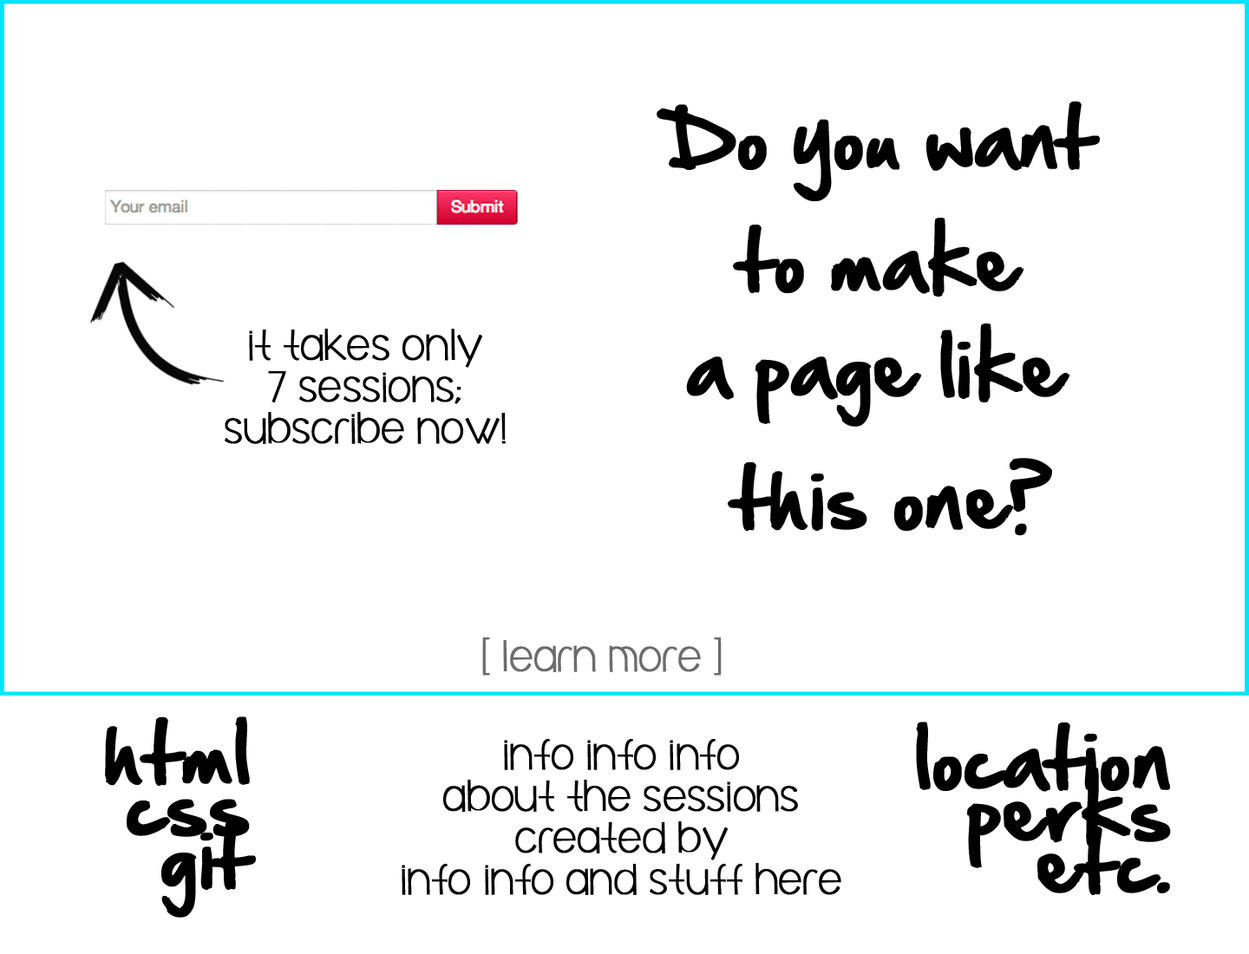
<style>
.page{position:relative;width:1249px;height:954px;background:#ffffff}
.page>*{position:absolute;margin:0}
.t1{font:71.1px "HandOfSean";color:#000000;font-weight:bold}
.t2{font:41.6px/41.6px "cafbrewery";color:#000000;font-weight:bold}
.t3{font:41.6px "cafbrewery";color:#6c6c6c;font-weight:bold}
.t4{font:71.1px/52.1px "HandOfSean";color:#000000;font-weight:bold}
</style>
<div class="page">
<p class="t1" style="left:657px;top:102px;width:443px;height:99px">Do you want</p>
<p class="t1" style="left:733px;top:218px;width:291px;height:79px">to make</p>
<p class="t2" style="left:225px;top:329px;width:281px;height:115px;text-align:center">it takes only<br>7 sessions;<br>subscribe now!</p>
<p class="t1" style="left:686px;top:324px;width:384px;height:103px">a page like</p>
<p class="t1" style="left:728px;top:458px;width:324px;height:78px">this one?</p>
<p class="t3" style="left:482px;top:638px;width:240px;height:38px">[ learn more ]</p>
<p class="t4" style="left:105px;top:717px;width:151px;height:201px;text-align:right">html<br>css<br>git</p>
<p class="t4" style="left:916px;top:722px;width:255px;height:173px;text-align:right">location<br>perks<br>etc.</p>
<p class="t2" style="left:402px;top:739px;width:440px;height:156px;text-align:center">info info info<br>about the sessions<br>created by<br>info info and stuff here</p>
</div>
